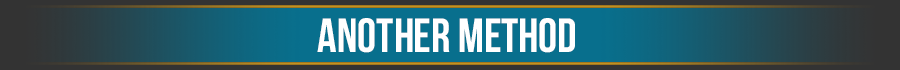
<style>
.page{position:relative;width:900px;height:70px;background:#333333}
.page>*{position:absolute;margin:0}
.t1{font:48px "UTM-Bebas";color:#ffffff}
</style>
<div class="page">
<p class="t1" style="left:317px;top:18px;width:258px;height:35px">another method</p>
</div>
